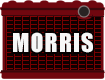
<style>
.page{position:relative;width:105px;height:80px;background:#0f0000}
.page>*{position:absolute;margin:0}
.t1{font:24px "Impact";letter-spacing:0.05em;color:#f7f7f7}
</style>
<div class="page">
<p class="t1" style="left:13px;top:32px;width:80px;height:21px">MORRIS</p>
</div>
